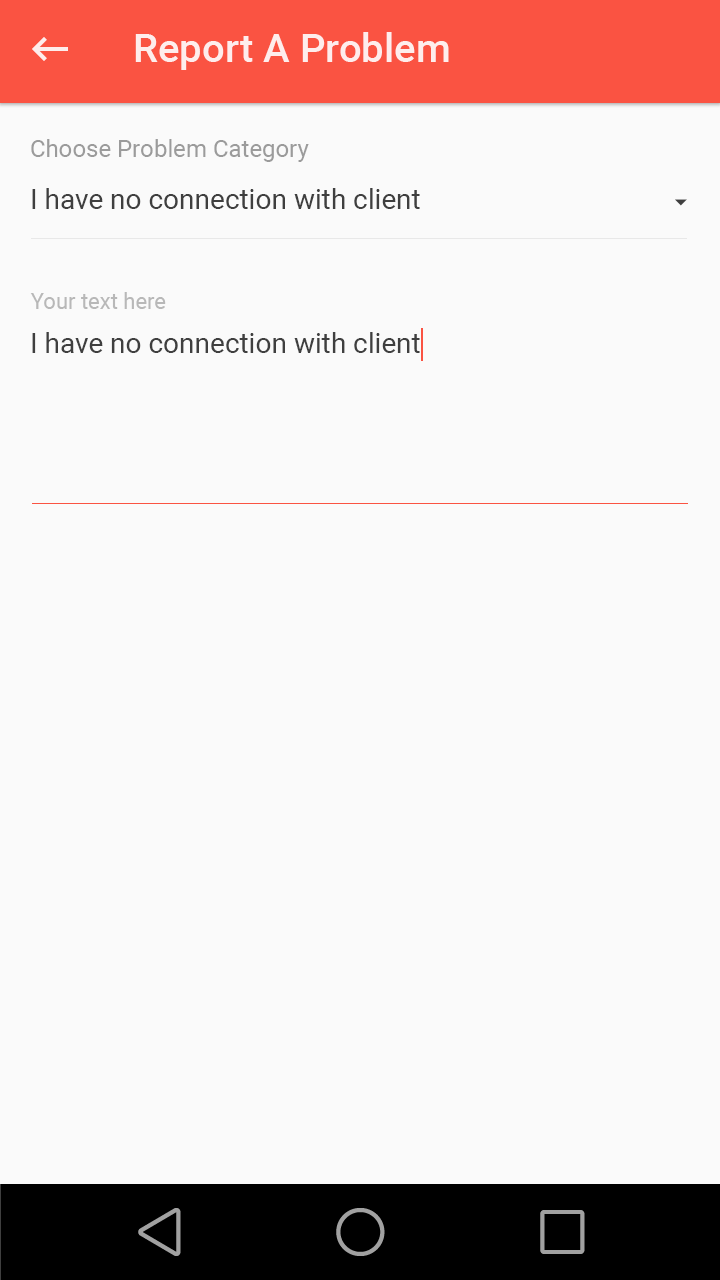
<style>
.page{position:relative;width:720px;height:1280px;background:#fafafa}
.page>*{position:absolute;margin:0}
.t1{font:40px "Roboto-Medium";color:#ffffff}
.t2{font:24px "Roboto-Regular";color:#9b9b9b}
.t3{font:28px "Roboto-Regular";color:#3f3f3f}
.t4{font:22px "Roboto-Regular";color:#b8b8b8}
</style>
<div class="page">
<p class="t1" style="left:135px;top:32px;width:314px;height:38px;opacity:0.87">Report A Problem</p>
<p class="t2" style="left:31px;top:139px;width:278px;height:23px">Choose Problem Category</p>
<p class="t3" style="left:32px;top:188px;width:388px;height:21px">I have no connection with client</p>
<p class="t4" style="left:30px;top:292px;width:136px;height:17px">Your text here</p>
<p class="t3" style="left:32px;top:332px;width:388px;height:21px">I have no connection with client</p>
</div>
